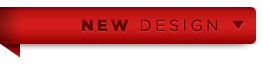
<style>
.page{position:relative;width:262px;height:64px;background:#ffffff}
.page>*{position:absolute;margin:0}
.t1{font:16px "GothamBook";letter-spacing:0.2em;color:#600000;text-transform:uppercase}
.t2{font:16px "GothamBlack";letter-spacing:0.2em;color:#600000;text-transform:uppercase}
</style>
<div class="page">
<p class="t1" style="left:81px;top:19px;width:137px;height:13px"><span class="t2">NEW </span>Design</p>
</div>
